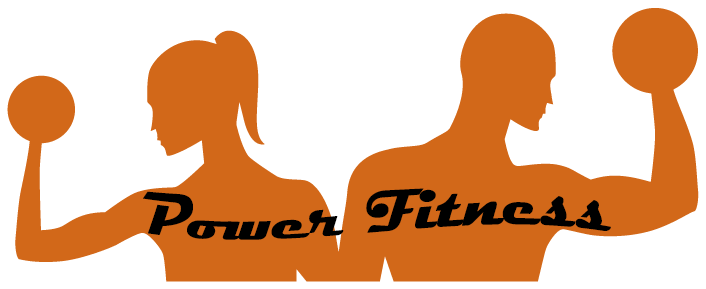
<style>
.page{position:relative;width:706px;height:289px;background:#ffffff}
.page>*{position:absolute;margin:0}
.t1{font:60px "Magneto-Bold";color:#000000}
</style>
<div class="page">
<p class="t1" style="left:143px;top:188px;width:468px;height:52px">Power Fitness</p>
</div>
